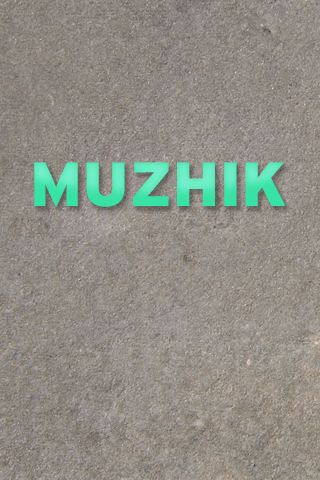
<style>
.page{position:relative;width:320px;height:480px}
.page>*{position:absolute;margin:0}
.t1{font:62px "InterstateBlack"}
</style>
<div class="page">
<p class="t1" style="left:34px;top:162px;width:252px;height:46px">MUZHIK</p>
</div>
